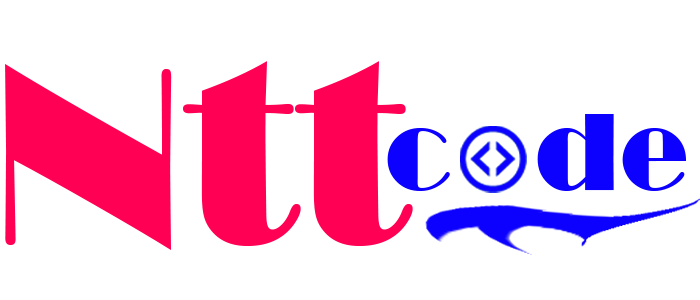
<style>
.page{position:relative;width:700px;height:300px;background:#ffffff}
.page>*{position:absolute;margin:0}
.t1{font:258.4px "Broadway";color:#ff0054}
.t2{font:114.1px "Broadway";color:#0c00ff}
</style>
<div class="page">
<p class="t1" style="left:5px;top:61px;width:408px;height:189px">Ntt</p>
<p class="t2" style="left:387px;top:114px;width:299px;height:77px">c   de</p>
</div>
